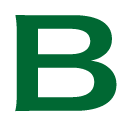
<style>
.page{position:relative;width:128px;height:128px;background:#ffffff}
.page>*{position:absolute;margin:0}
.t1{font:120px "HiraginoSansGB-W6";letter-spacing:0.025em;color:#006833;scale:1.33 1}
</style>
<div class="page">
<p class="t1" style="left:15px;top:15px;width:102px;height:97px">B</p>
</div>
